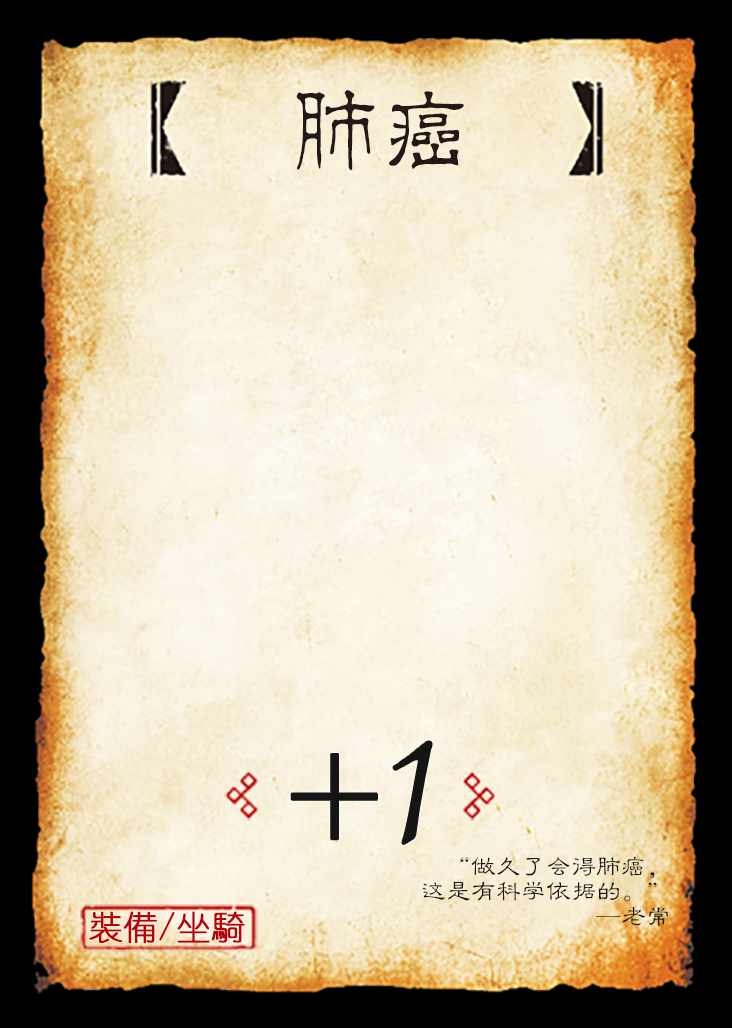
<style>
.page{position:relative;width:732px;height:1028px}
.page>*{position:absolute;margin:0}
.t1{font:95.8px "JMFLS_GBK";color:#221815;scale:0.95 1}
.t2{font:191.7px "Jxixinkai";color:#151515}
.t3{font:141.7px "Jxixinkai";color:#151515}
.t4{font:25px/25px "FZLBJW--GB1-0";color:#151515}
.t5{font:33.3px "YouYuan";color:#ba0007;font-weight:bold}
</style>
<div class="page">
<p class="t1" style="left:296px;top:90px;width:168px;height:81px">肺癌</p>
<p class="t2" style="left:393px;top:741px;width:39px;height:103px">1</p>
<p class="t3" style="left:291px;top:754px;width:86px;height:86px">+</p>
<p class="t4" style="left:422px;top:856px;width:246px;height:70px;text-align:right">“做久了会得肺癌，<br>这是有科学依据的。”<br>—老常</p>
<p class="t5" style="left:89px;top:911px;width:156px;height:33px">裝備/坐騎</p>
</div>
